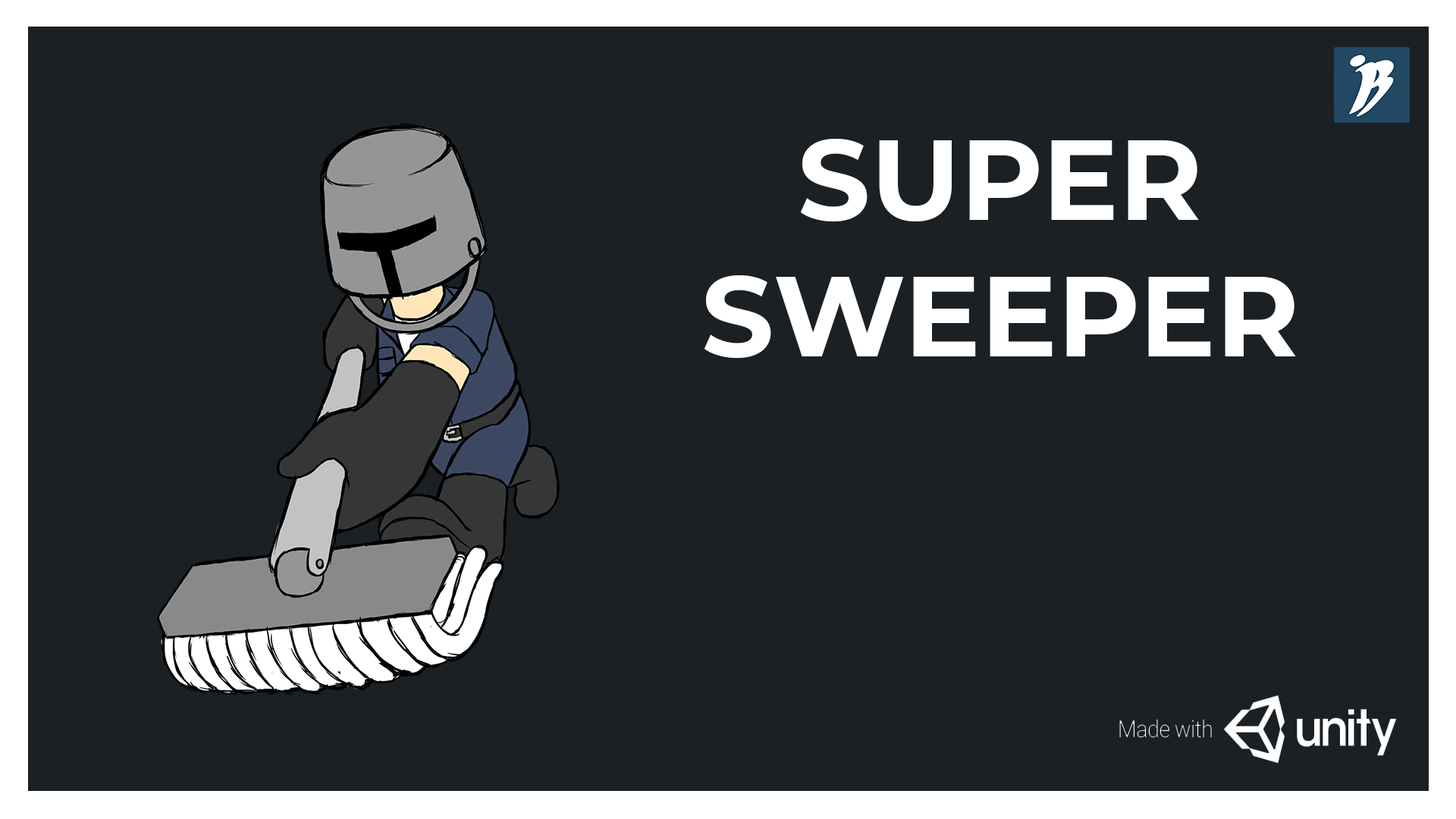
<style>
.page{position:relative;width:1456px;height:819px;background:#1b2024}
.page>*{position:absolute;margin:0}
.t1{font:113.7px "Montserrat-Bold";color:#ffffff}
</style>
<div class="page">
<p class="t1" style="left:704px;top:139px;width:592px;height:219px;text-align:center">SUPER<br>SWEEPER</p>
</div>
